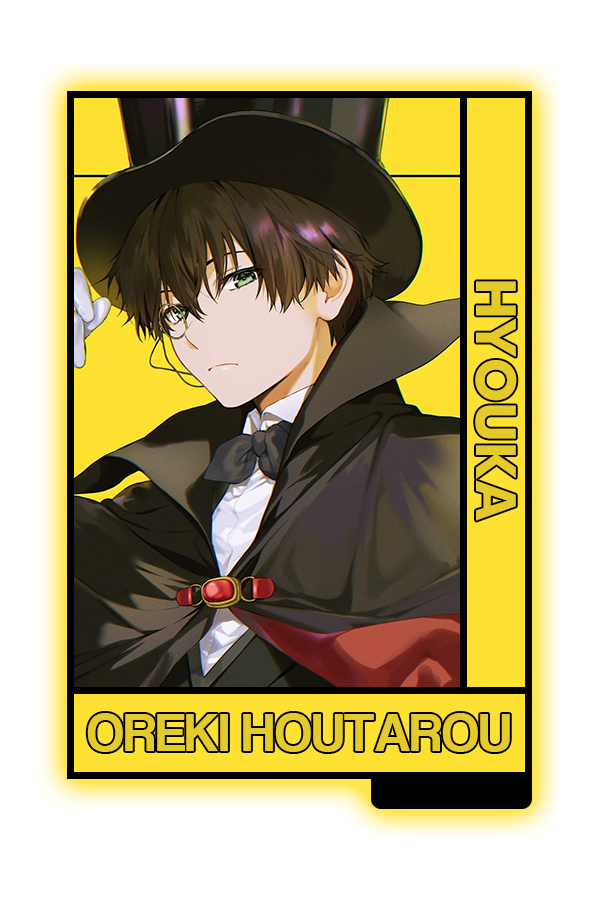
<style>
.page{position:relative;width:600px;height:900px;background:#ffffff}
.page>*{position:absolute;margin:0}
.t1{font:55.2px "CoolveticaRg-Regular";color:#e5ca2b}
</style>
<div class="page">
<p class="t1" style="left:87px;top:713px;width:423px;height:39px">OREKI HOUTAROU</p>
</div>
